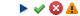
<style>
.page{position:relative;width:80px;height:16px;background:#ffffff}
.page>*{position:absolute;margin:0}
.t1{font:9px "KozGoPro-Regular";color:#0c457f}
</style>
<div class="page">
<p class="t1" style="left:19px;top:4px;width:9px;height:9px;rotate:90deg">▲</p>
</div>
